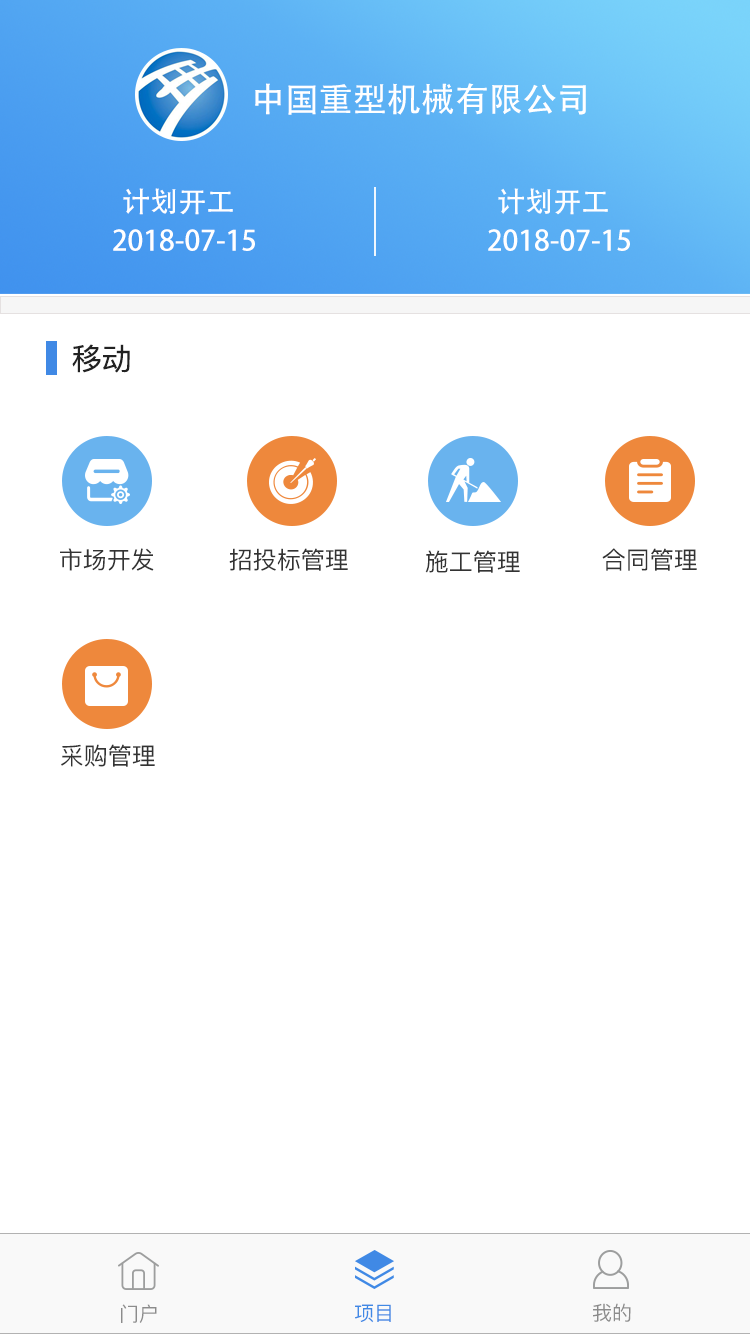
<style>
.page{position:relative;width:750px;height:1334px;background:#ffffff}
.page>*{position:absolute;margin:0}
.t1{font:34px "AdobeHeitiStd-Regular";color:#ffffff}
.t2{font:28px "AdobeHeitiStd-Regular";color:#ffffff}
.t3{font:30px "PingFangSC-Regular";color:#222222}
.t4{font:24px "PingFangSC-Regular";color:#333333}
.t5{font:20px "PingFangSC-Regular";color:#8c8c8c}
.t6{font:20px "PingFangSC-Regular";color:#4089e5}
</style>
<div class="page">
<p class="t1" style="left:255px;top:83px;width:331px;height:32px">中国重型机械有限公司</p>
<p class="t2" style="left:123px;top:188px;width:110px;height:27px">计划开工</p>
<p class="t2" style="left:498px;top:188px;width:110px;height:27px">计划开工</p>
<p class="t2" style="left:113px;top:229px;width:142px;height:22px">2018-07-15</p>
<p class="t2" style="left:488px;top:229px;width:142px;height:22px">2018-07-15</p>
<p class="t3" style="left:72px;top:344px;width:58px;height:29px">移动</p>
<p class="t4" style="left:60px;top:548px;width:94px;height:23px">市场开发</p>
<p class="t4" style="left:229px;top:548px;width:119px;height:23px">招投标管理</p>
<p class="t4" style="left:425px;top:550px;width:95px;height:23px">施工管理</p>
<p class="t4" style="left:602px;top:548px;width:95px;height:23px">合同管理</p>
<p class="t4" style="left:61px;top:744px;width:94px;height:23px">采购管理</p>
<p class="t5" style="left:121px;top:1304px;width:36px;height:19px">门户</p>
<p class="t6" style="left:355px;top:1304px;width:36px;height:19px">项目</p>
<p class="t5" style="left:593px;top:1303px;width:38px;height:19px">我的</p>
</div>
